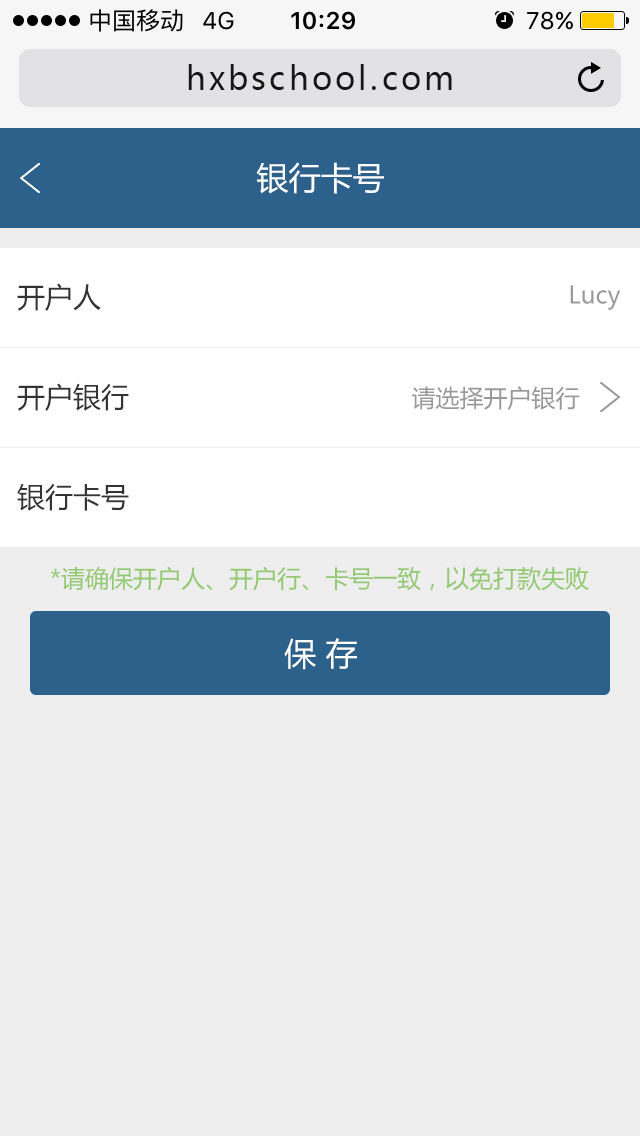
<style>
.page{position:relative;width:640px;height:1136px;background:#eeeeee}
.page>*{position:absolute;margin:0}
.t1{font:32px "MicrosoftYaHei";letter-spacing:0.1em;color:#171717}
.t2{font:32px "MicrosoftYaHei";color:#ffffff}
.t3{font:28px "MicrosoftYaHei";color:#333333}
.t4{font:24px "MicrosoftYaHei";color:#999999}
.t5{font:24px "MicrosoftYaHei";color:#93c971}
</style>
<div class="page">
<p class="t1" style="left:188px;top:64px;width:264px;height:26px">hxbschool.com</p>
<p class="t2" style="left:256px;top:162px;width:128px;height:32px">银行卡号</p>
<p class="t3" style="left:17px;top:283px;width:84px;height:28px">开户人</p>
<p class="t4" style="left:570px;top:285px;width:51px;height:25px">Lucy</p>
<p class="t3" style="left:17px;top:383px;width:112px;height:28px">开户银行</p>
<p class="t4" style="left:412px;top:386px;width:168px;height:24px">请选择开户银行</p>
<p class="t3" style="left:17px;top:483px;width:112px;height:28px">银行卡号</p>
<p class="t5" style="left:51px;top:566px;width:538px;height:25px">*请确保开户人、开户行、卡号一致，以免打款失败</p>
<p class="t2" style="left:284px;top:638px;width:73px;height:32px">保 存</p>
</div>
